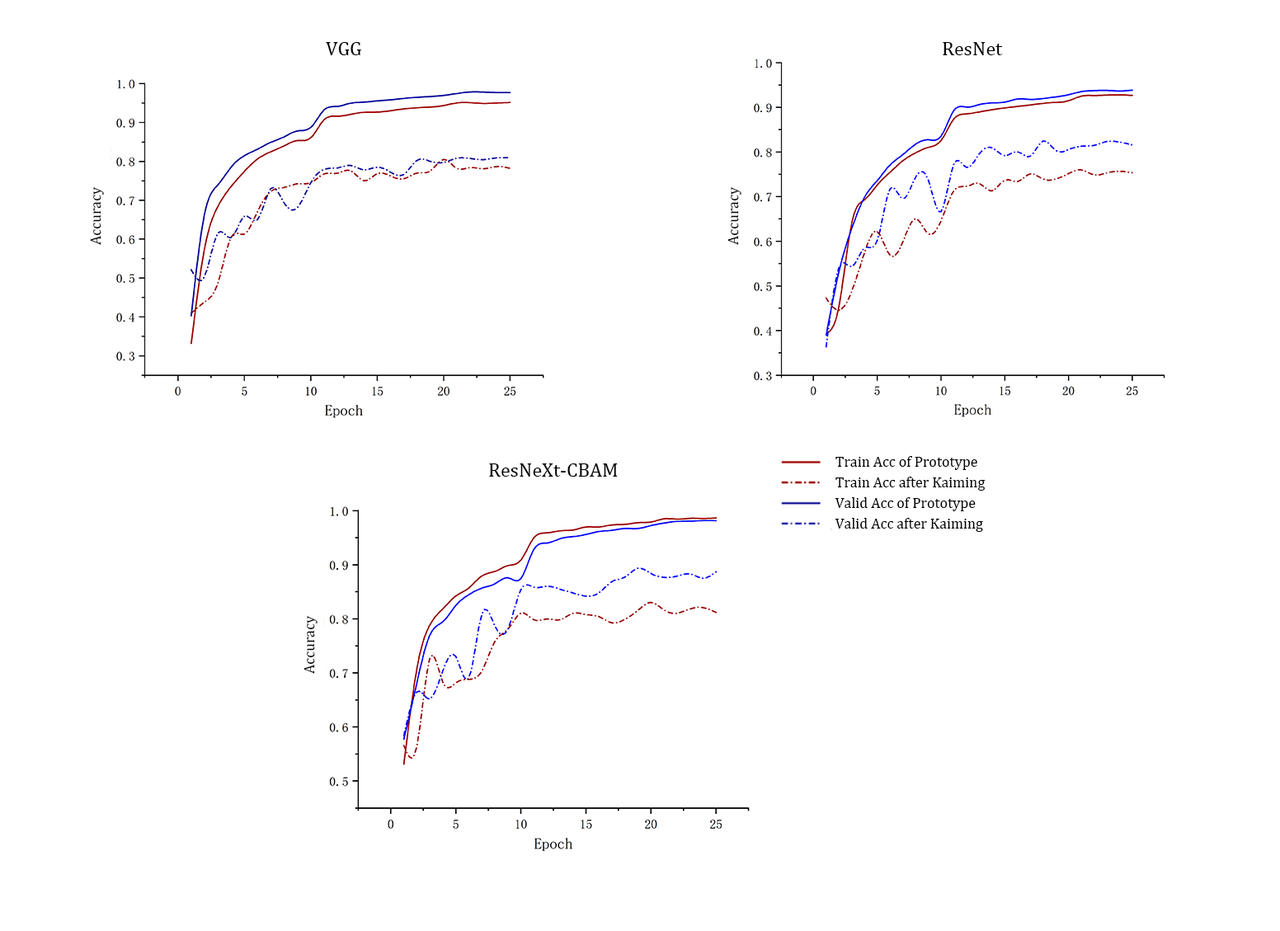
<style>
.page{position:relative;width:1280px;height:931px;background:#ffffff}
.page>*{position:absolute;margin:0}
.t1{font:19.8px "CambriaMath";color:#000000}
.t2{font:14.8px "CambriaMath";color:#000000}
</style>
<div class="page">
<p class="t1" style="left:326px;top:42px;width:35px;height:13px">VGG</p>
<p class="t1" style="left:943px;top:42px;width:60px;height:13px">ResNet</p>
<p class="t2" style="left:90px;top:186px;width:14px;height:59px;rotate:-90deg">Accuracy</p>
<p class="t2" style="left:728px;top:186px;width:14px;height:59px;rotate:-90deg">Accuracy</p>
<p class="t2" style="left:836px;top:456px;width:142px;height:14px">Train Acc of Prototype</p>
<p class="t1" style="left:489px;top:464px;width:129px;height:13px">ResNeXt-CBAM</p>
<p class="t2" style="left:836px;top:477px;width:150px;height:14px">Train Acc after Kaiming</p>
<p class="t2" style="left:835px;top:497px;width:141px;height:14px">Valid Acc of Prototype</p>
<p class="t2" style="left:835px;top:518px;width:148px;height:14px">Valid Acc after Kaiming</p>
<p class="t2" style="left:304px;top:615px;width:14px;height:59px;rotate:-90deg">Accuracy</p>
</div>
